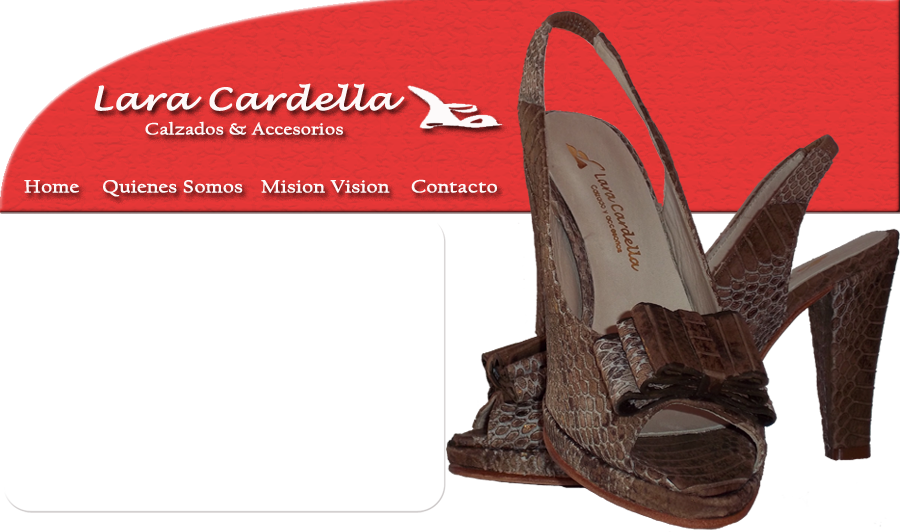
<style>
.page{position:relative;width:900px;height:532px;background:#ffffff}
.page>*{position:absolute;margin:0}
.t1{font:30px "LucidaHandwriting-Italic";color:#fdf8f8;font-weight:bold;scale:1.2 1}
.t2{font:16.6px "CalifornianFB-Reg";color:#fdf8f8;font-weight:bold;scale:1.2 1}
.t3{font:18px "CalifornianFB-Reg";color:#fdf8f8;font-weight:bold;scale:1.2 1}
</style>
<div class="page">
<p class="t1" style="left:94px;top:83px;width:311px;height:28px">Lara Cardella</p>
<p class="t2" style="left:145px;top:121px;width:198px;height:14px">Calzados &amp; Accesorios</p>
<p class="t3" style="left:24px;top:180px;width:55px;height:13px">Home</p>
<p class="t3" style="left:103px;top:180px;width:140px;height:17px">Quienes Somos</p>
<p class="t3" style="left:261px;top:180px;width:129px;height:13px">Mision Vision</p>
<p class="t3" style="left:411px;top:179px;width:86px;height:14px">Contacto</p>
</div>
